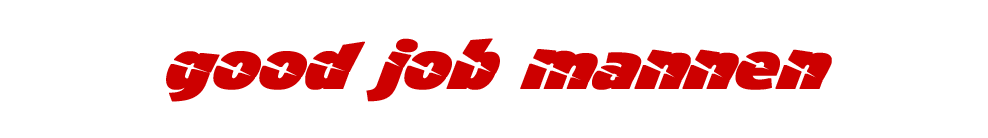
<style>
.page{position:relative;width:988px;height:138px;background:#ffffff}
.page>*{position:absolute;margin:0}
.t1{font:72px "A-Cuchillada";color:#cd0000;font-weight:bold;font-style:italic}
</style>
<div class="page">
<p class="t1" style="left:166px;top:38px;width:666px;height:64px">good job mannen</p>
</div>
